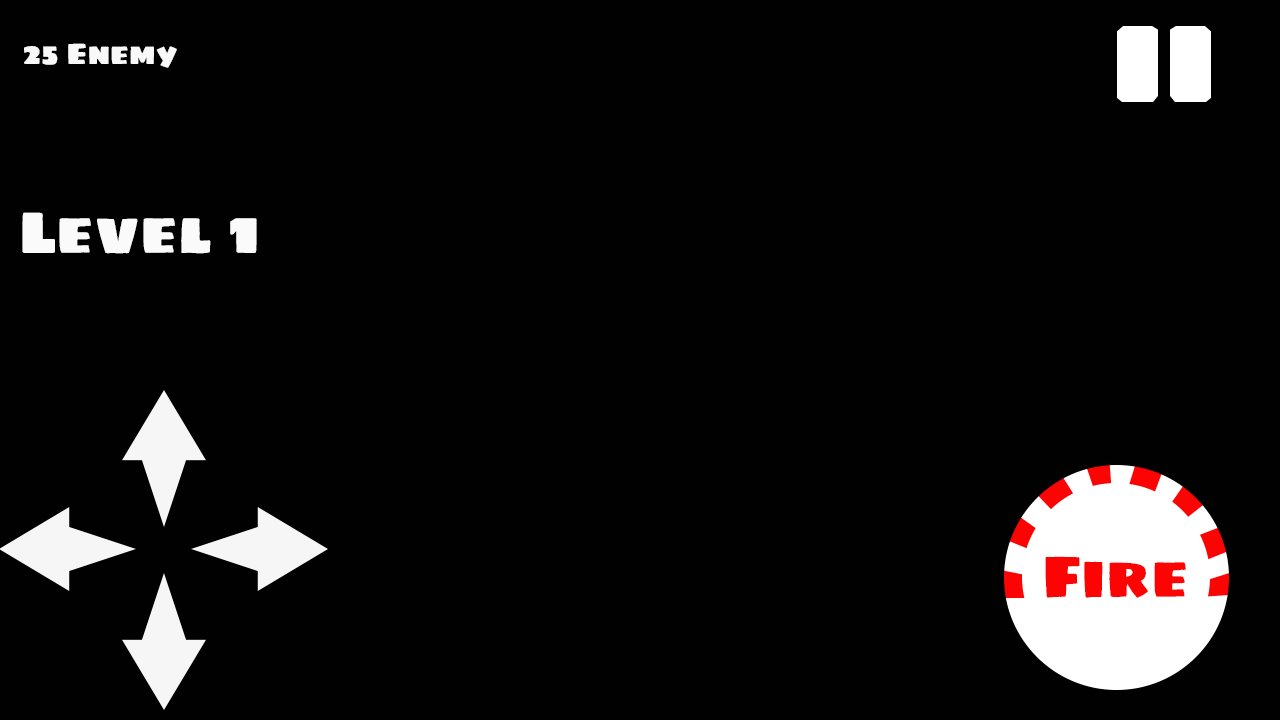
<style>
.page{position:relative;width:1280px;height:720px;background:#010101}
.page>*{position:absolute;margin:0}
.t1{font:30px "SigmarOne";color:#f9f9f9}
.t2{font:60px "SigmarOne";color:#f9f9f9}
.t3{font:60px "SigmarOne";color:#fd0404}
</style>
<div class="page">
<p class="t1" style="left:24px;top:43px;width:153px;height:25px">25 Enemy</p>
<p class="t2" style="left:22px;top:212px;width:235px;height:42px">Level 1</p>
<p class="t3" style="left:1045px;top:556px;width:141px;height:42px">Fire</p>
</div>
